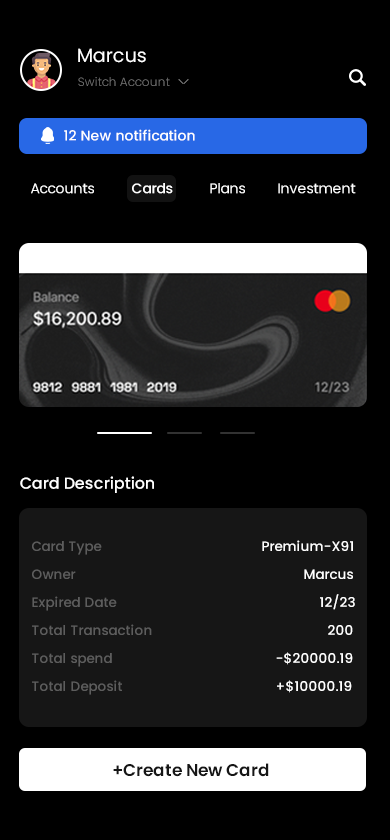
<style>
.page{position:relative;width:390px;height:840px;background:#000000}
.page>*{position:absolute;margin:0}
.t1{font:19px "Poppins-Regular";color:#ffffff}
.t2{font:12px "Poppins-Light";color:#6f6f6f}
.t3{font:14px "Poppins-Medium";color:#ffffff}
.t4{font:14px "Poppins-Regular";color:#ffffff}
.t5{font:16px "Poppins-Medium";color:#ffffff}
.t6{font:13.5px/14px "Poppins-Medium";color:#5d5d5d}
.t7{font:13.5px/14px "Poppins-Medium";color:#ffffff}
.t8{font:17px "Poppins-SemiBold";color:#161616}
</style>
<div class="page">
<p class="t1" style="left:78px;top:48px;width:68px;height:15px">Marcus</p>
<p class="t2" style="left:78px;top:77px;width:92px;height:9px">Switch Account</p>
<p class="t3" style="left:64px;top:129px;width:131px;height:12px">12 New notification</p>
<p class="t4" style="left:31px;top:183px;width:63px;height:11px">Accounts</p>
<p class="t3" style="left:132px;top:183px;width:41px;height:11px">Cards</p>
<p class="t4" style="left:210px;top:183px;width:35px;height:11px">Plans</p>
<p class="t4" style="left:278px;top:183px;width:78px;height:11px">Investment</p>
<p class="t5" style="left:20px;top:476px;width:134px;height:17px">Card Description</p>
<p class="t6" style="left:32px;top:540px;width:323px;height:155px">Card Type <span class="t7">                                       Premium-X91<br><br></span>Owner<span class="t7">                                                         Marcus<br><br></span>Expired Date<span class="t7">                      12/23<br><br></span>Total Transaction <span class="t7">           200<br><br></span>Total spend<span class="t7">           -$20000.19<br><br></span>Total Deposit<span class="t7">             +$10000.19</span></p>
<p class="t8" style="left:113px;top:763px;width:156px;height:14px">+Create New Card</p>
</div>
